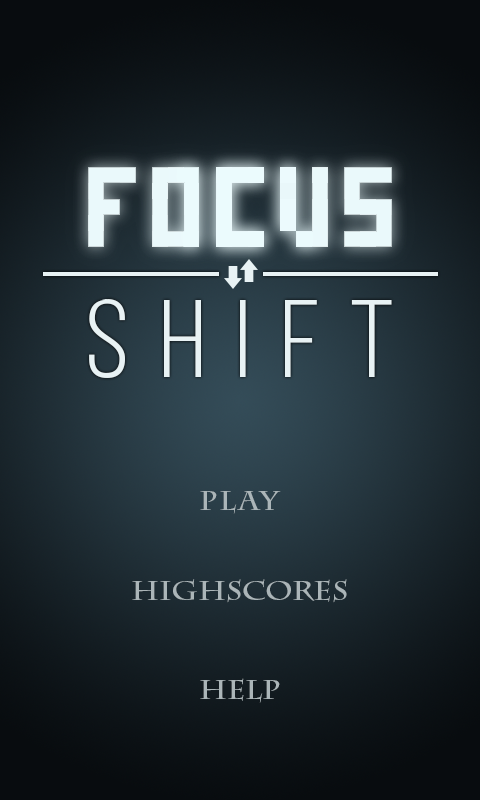
<style>
.page{position:relative;width:480px;height:800px}
.page>*{position:absolute;margin:0}
.t1{font:109.3px "BebasNeueBook";letter-spacing:0.25em;color:#e8f2f4;scale:1.09 1}
.t2{font:26.7px "CharlemagneStd-Bold";letter-spacing:0.05em;color:#abb5b8;scale:1.09 1}
.t3{font:26.7px "CharlemagneStd-Bold";color:#abb5b8;scale:1.09 1}
.t4{font:26.7px "CharlemagneStd-Bold";letter-spacing:-0.01em;color:#abb5b8;scale:1.09 1}
</style>
<div class="page">
<p class="t1" style="left:89px;top:299px;width:303px;height:79px">SHIFT</p>
<p class="t2" style="left:200px;top:491px;width:81px;height:23px">play</p>
<p class="t3" style="left:132px;top:579px;width:215px;height:24px">highscores</p>
<p class="t4" style="left:200px;top:678px;width:80px;height:25px">help</p>
</div>
